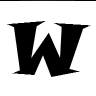
<style>
.page{position:relative;width:96px;height:96px;background:#ffffff}
.page>*{position:absolute;margin:0}
.t1{font:75px "SnapITC-Regular";color:#000000}
</style>
<div class="page">
<p class="t1" style="left:7px;top:20px;width:84px;height:56px">W</p>
</div>
